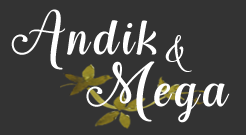
<style>
.page{position:relative;width:246px;height:135px;background:#333333}
.page>*{position:absolute;margin:0}
.t1{font:60px "SpringinMay";letter-spacing:0.07em;color:#ffffff}
.t2{font:38.7px "SpringinMay";letter-spacing:0.07em;color:#ffffff}
</style>
<div class="page">
<p class="t1" style="left:11px;top:9px;width:146px;height:61px">Andik</p>
<p class="t2" style="left:165px;top:35px;width:27px;height:37px">&amp;</p>
<p class="t1" style="left:86px;top:61px;width:144px;height:62px">Mega</p>
</div>
